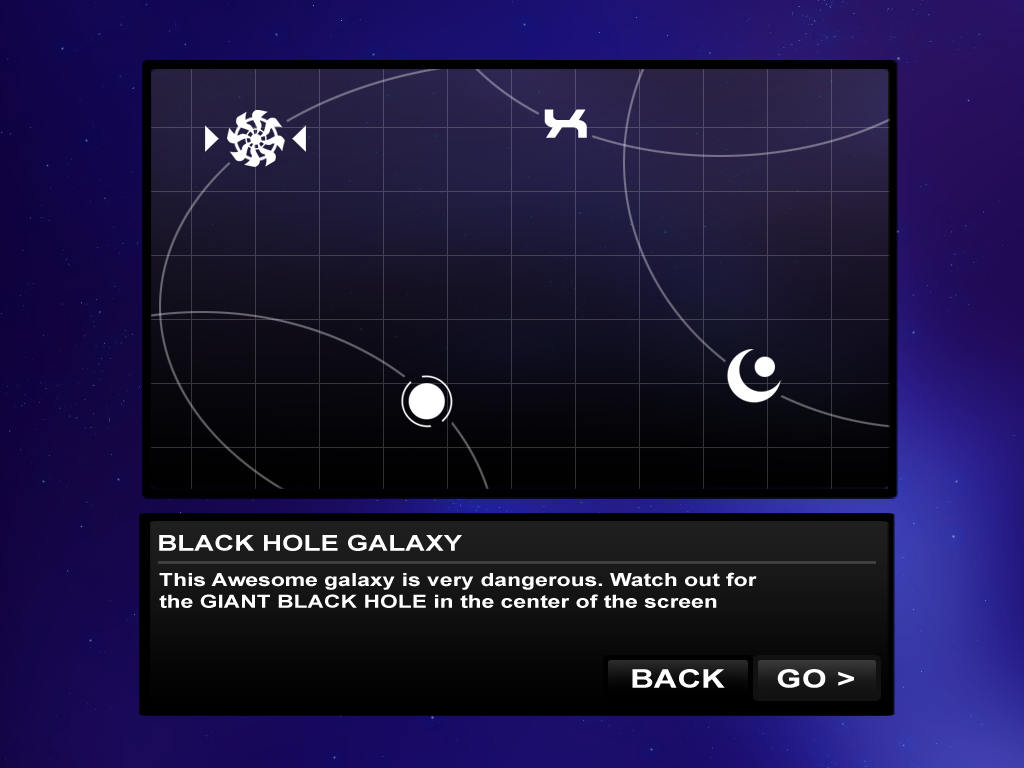
<style>
.page{position:relative;width:1024px;height:768px}
.page>*{position:absolute;margin:0}
.t1{font:21.8px "Arial-BoldMT";color:#ffffff;scale:1.27 1}
.t2{font:18px "Arial-BoldMT";color:#ffffff;scale:1.27 1}
.t3{font:25px "Arial-BoldMT";color:#ffffff;font-weight:bold;scale:1.27 1}
</style>
<div class="page">
<p class="t1" style="left:159px;top:534px;width:303px;height:17px">BLACK HOLE GALAXY</p>
<p class="t2" style="left:159px;top:572px;width:598px;height:36px">This Awesome galaxy is very dangerous. Watch out for the GIANT BLACK HOLE in the center of the screen</p>
<p class="t3" style="left:777px;top:669px;width:77px;height:19px">GO &gt;</p>
</div>
